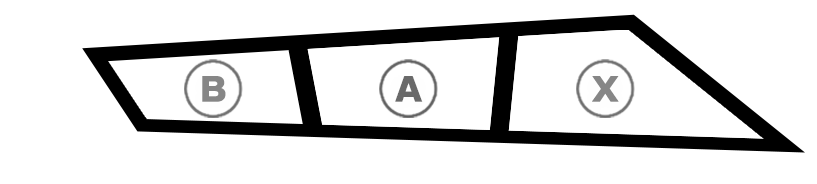
<style>
.page{position:relative;width:817px;height:184px;background:#ffffff}
.page>*{position:absolute;margin:0}
.t1{font:30.8px "WanpakuRuika-08";letter-spacing:0.05em;color:#868686;font-weight:bold;scale:1.1 1}
.t2{font:30.8px "WanpakuRuika-08";letter-spacing:0.05em;color:#696969;font-weight:bold;scale:1.1 1}
</style>
<div class="page">
<p class="t1" style="left:202px;top:76px;width:24px;height:26px">B</p>
<p class="t2" style="left:395px;top:76px;width:28px;height:26px">A</p>
<p class="t1" style="left:592px;top:76px;width:27px;height:26px">X</p>
</div>
